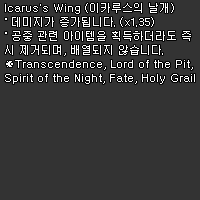
<style>
.page{position:relative;width:200px;height:200px;background:#333333}
.page>*{position:absolute;margin:0}
.t1{font:11px/14px "Dotum";color:#ffffff}
</style>
<div class="page">
<p class="t1" style="left:5px;top:3px;width:190px;height:81px">Icarus's Wing (이카루스의 날개)<br>˚ 데미지가 증가됩니다. (x1.35)<br>˚ 공중 관련 아이템을 획득하더라도 즉<br>시 제거되며, 배열되지 않습니다.<br>※Transcendence, Lord of the Pit,<br>Spirit of the Night, Fate, Holy Grail</p>
</div>
